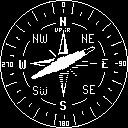
<style>
.page{position:relative;width:128px;height:128px;background:#000000}
.page>*{position:absolute;margin:0}
.t1{font:16px "PixelOperatorSC-Bold";color:#ffffff}
.t2{font:16px "PixelOperatorSC";color:#ffffff}
</style>
<div class="page">
<p class="t1" style="left:60px;top:17px;width:6px;height:9px">N</p>
<p class="t2" style="left:33px;top:34px;width:14px;height:9px">NW</p>
<p class="t2" style="left:82px;top:34px;width:12px;height:9px">NE</p>
<p class="t1" style="left:19px;top:60px;width:7px;height:9px">W</p>
<p class="t1" style="left:102px;top:59px;width:6px;height:9px">E</p>
<p class="t2" style="left:33px;top:86px;width:14px;height:9px">SW</p>
<p class="t2" style="left:83px;top:85px;width:12px;height:9px">SE</p>
<p class="t1" style="left:60px;top:101px;width:6px;height:9px">S</p>
</div>
